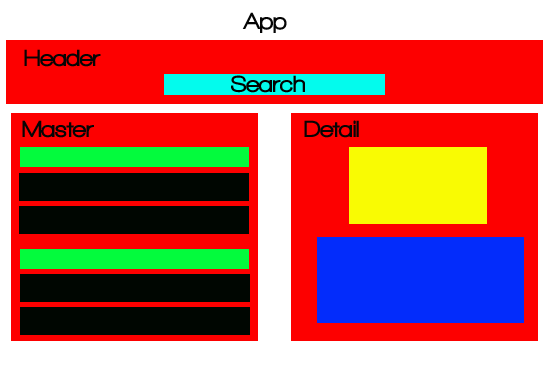
<style>
.page{position:relative;width:550px;height:380px;background:#fd0000}
.page>*{position:absolute;margin:0}
.t1{font:24px "WalkwayBlack";color:#040404}
.t2{font:24px "WalkwayBlack";color:#050505}
.t3{font:24px "WalkwayBlack";color:#030200}
</style>
<div class="page">
<p class="t1" style="left:242px;top:12px;width:45px;height:21px">App</p>
<p class="t2" style="left:24px;top:49px;width:77px;height:18px">Header</p>
<p class="t3" style="left:231px;top:75px;width:74px;height:18px">Search</p>
<p class="t2" style="left:22px;top:120px;width:72px;height:18px">Master</p>
<p class="t2" style="left:304px;top:120px;width:55px;height:18px">Detail</p>
</div>
